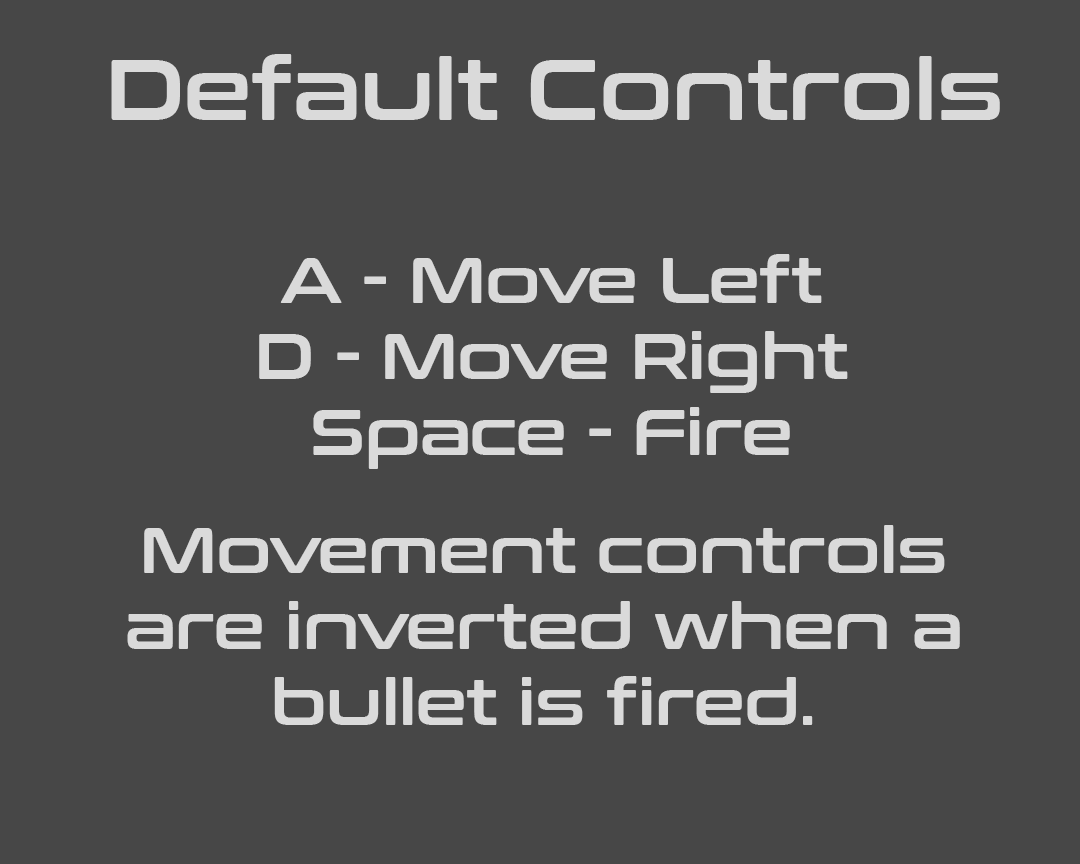
<style>
.page{position:relative;width:1080px;height:864px;background:#474747}
.page>*{position:absolute;margin:0}
.t1{font:84.7px "ConthraxSb-Regular";color:#dadada}
.t2{font:63.5px "ConthraxSb-Regular";color:#dadada}
</style>
<div class="page">
<p class="t1" style="left:111px;top:54px;width:889px;height:66px">Default Controls</p>
<p class="t2" style="left:259px;top:254px;width:589px;height:215px;text-align:center">A - Move Left<br>D - Move Right<br>Space - Fire</p>
<p class="t2" style="left:127px;top:525px;width:833px;height:200px;text-align:center">Movement controls are inverted when a bullet is fired.</p>
</div>
